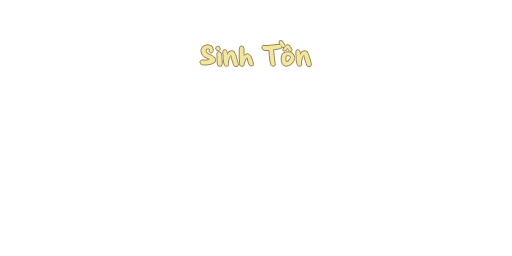
<style>
.page{position:relative;width:512px;height:256px;background:#ffffff}
.page>*{position:absolute;margin:0}
.t1{font:32px "BrianneTod";color:#f0e8a0}
</style>
<div class="page">
<p class="t1" style="left:200px;top:41px;width:111px;height:25px">Sinh Tồn</p>
</div>
